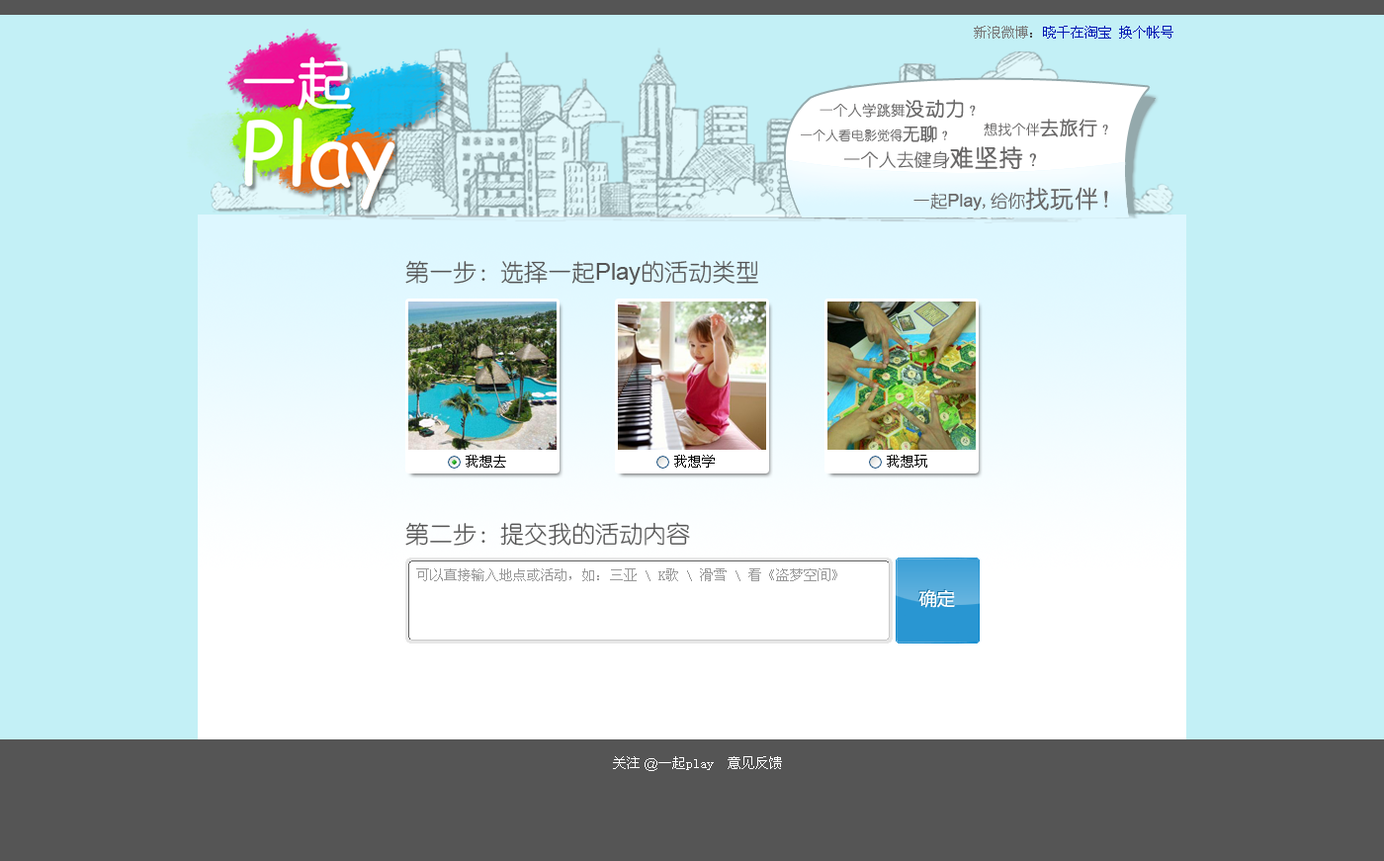
<style>
.page{position:relative;width:1384px;height:861px;background:#c3f0f6}
.page>*{position:absolute;margin:0}
.t1{font:13.8px "SimSun";color:#0015b1}
.t2{font:13.8px "SimSun";color:#797979}
.t3{font:13.8px "SimSun";color:#484848}
.t4{font:14.4px "YouYuan";color:#696868}
.t5{font:19.2px "YouYuan";color:#696868;font-weight:bold}
.t6{font:12.8px "YouYuan";color:#696868}
.t7{font:17.1px "YouYuan";color:#696868;font-weight:bold}
.t8{font:14px "YouYuan";color:#696868}
.t9{font:18.7px "YouYuan";color:#696868;font-weight:bold}
.t10{font:17.8px "YouYuan";color:#696868}
.t11{font:23.7px "YouYuan";color:#696868;font-weight:bold}
.t12{font:17.8px "ArialMT";color:#696868}
.t13{font:23.7px "YouYuan";color:#696868}
.t14{font:23.7px "YouYuan";color:#555555}
.t15{font:23.7px "ArialMT";color:#555555}
.t16{font:13.8px "SimSun";color:#000000}
.t17{font:13.8px "SimSun";color:#999999}
.t18{font:17.8px "MicrosoftYaHei"}
.t19{font:17.8px "MicrosoftYaHei";color:#ffffff}
.t20{font:13.8px "SimSun";color:#ffffff}
.t21{font:13.8px "ArialMT";color:#ffffff}
</style>
<div class="page">
<p class="t1" style="left:974px;top:26px;width:200px;height:13px"><span class="t2">新浪微博</span><span class="t3">：</span>晓千在淘宝 换个帐号</p>
<p class="t4" style="left:820px;top:99px;width:156px;height:20px">一个人学跳舞<span class="t5">没动力</span>？</p>
<p class="t6" style="left:801px;top:126px;width:146px;height:16px">一个人看电影觉得<span class="t7">无聊</span>？</p>
<p class="t8" style="left:984px;top:119px;width:125px;height:18px">想找个伴<span class="t9">去旅行</span>？</p>
<p class="t10" style="left:845px;top:146px;width:191px;height:23px">一个人去健身<span class="t11">难坚持</span>？</p>
<p class="t12" style="left:914px;top:187px;width:195px;height:24px"><span class="t10">一起</span>Play<span class="t10">,给你</span><span class="t11">找玩伴</span><span class="t13">！</span></p>
<p class="t14" style="left:405px;top:260px;width:353px;height:25px">第一步：选择一起<span class="t15">Play</span>的活动类型</p>
<p class="t16" style="left:466px;top:455px;width:40px;height:13px">我想去</p>
<p class="t16" style="left:674px;top:455px;width:41px;height:13px">我想学</p>
<p class="t16" style="left:887px;top:455px;width:41px;height:13px">我想玩</p>
<p class="t14" style="left:405px;top:522px;width:285px;height:24px">第二步：提交我的活动内容</p>
<p class="t17" style="left:416px;top:569px;width:422px;height:12px">可以直接输入地点或活动，如：三亚 \ K歌 \ 滑雪 \ 看《盗梦空间》</p>
<p class="t18" style="left:918px;top:588px;width:36px;height:19px">确定</p>
<p class="t19" style="left:919px;top:589px;width:36px;height:19px">确定</p>
<p class="t20" style="left:613px;top:756px;width:169px;height:15px">关注<span class="t21"> @</span>一起play  意见反馈</p>
</div>
